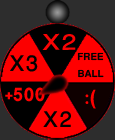
<style>
.page{position:relative;width:115px;height:140px;background:#2d2d2d}
.page>*{position:absolute;margin:0}
.t1{font:30.8px "WinSoftPro-Medium";color:#fa0404;scale:1.2 1}
.t2{font:13.8px "WinSoftPro-Bold";color:#020202}
.t3{font:30.8px "WinSoftPro-Medium";color:#020202}
.t4{font:27.7px "WinSoftPro-Bold";color:#ff0101}
.t5{font:36.9px "WinSoftPro-Medium";color:#ff0000}
</style>
<div class="page">
<p class="t1" style="left:42px;top:33px;width:34px;height:17px;rotate:-1deg">X2</p>
<p class="t2" style="left:77px;top:52px;width:27px;height:26px">FREE BALL</p>
<p class="t3" style="left:10px;top:55px;width:28px;height:17px">X3</p>
<p class="t4" style="left:5px;top:87px;width:40px;height:15px">+500</p>
<p class="t5" style="left:85px;top:89px;width:11px;height:20px">):</p>
<p class="t3" style="left:43px;top:111px;width:28px;height:16px">X2</p>
</div>
